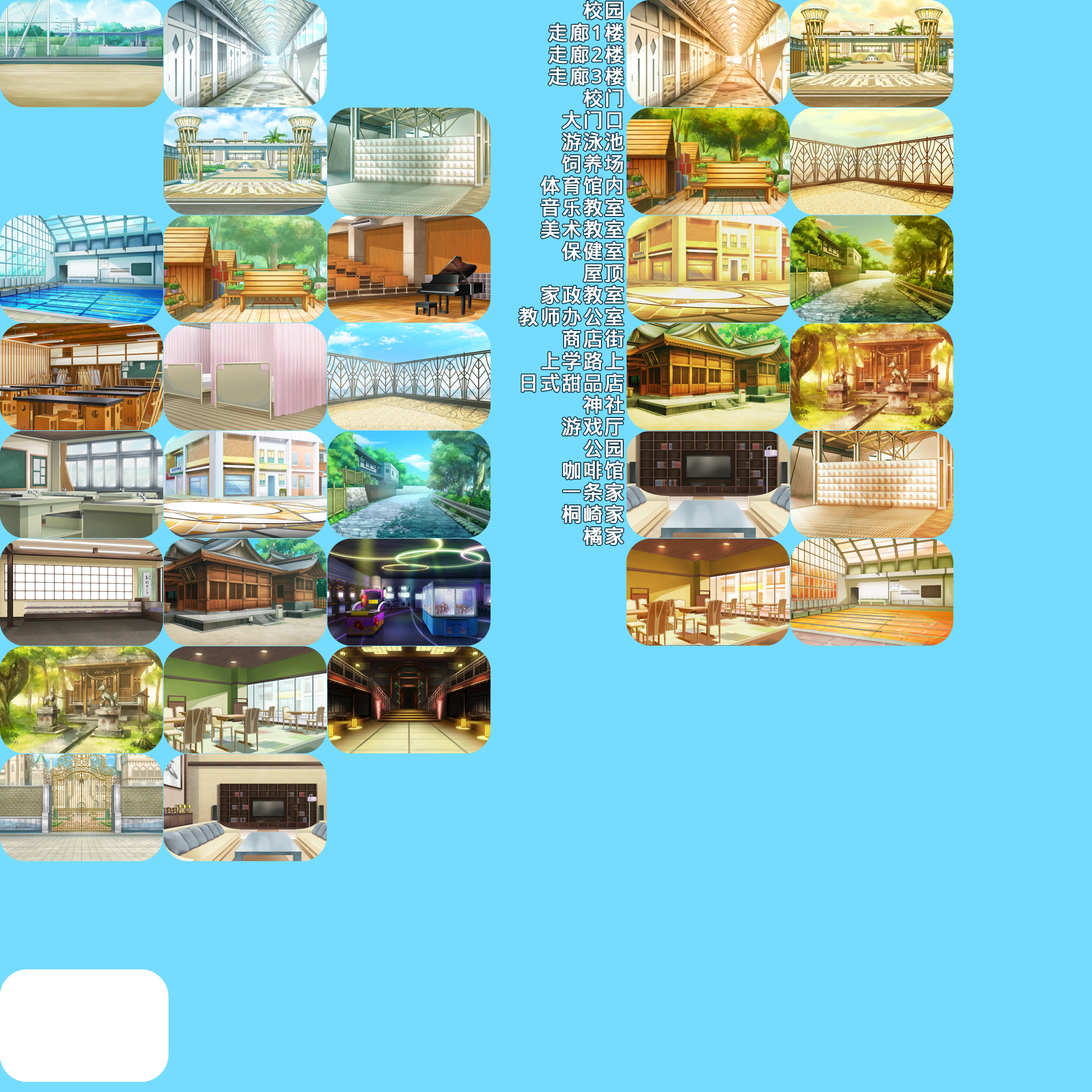
<style>
.page{position:relative;width:1092px;height:1092px;background:#76dcff}
.page>*{position:absolute;margin:0}
.t1{font:19.9px/21.9px "WenQuanYiMicroHeiMono";letter-spacing:0.05em;color:#ffffff;font-weight:bold}
</style>
<div class="page">
<p class="t1" style="left:519px;top:1px;width:105px;height:544px;text-align:right">校园<br>走廊1楼<br>走廊2楼<br>走廊3楼<br>校门<br>大门口<br>游泳池<br>饲养场<br>体育馆内<br>音乐教室<br>美术教室<br>保健室<br>屋顶<br>家政教室<br>教师办公室<br>商店街<br>上学路上<br>日式甜品店<br>神社<br>游戏厅<br>公园<br>咖啡馆<br>一条家<br>桐崎家<br>橘家</p>
</div>
